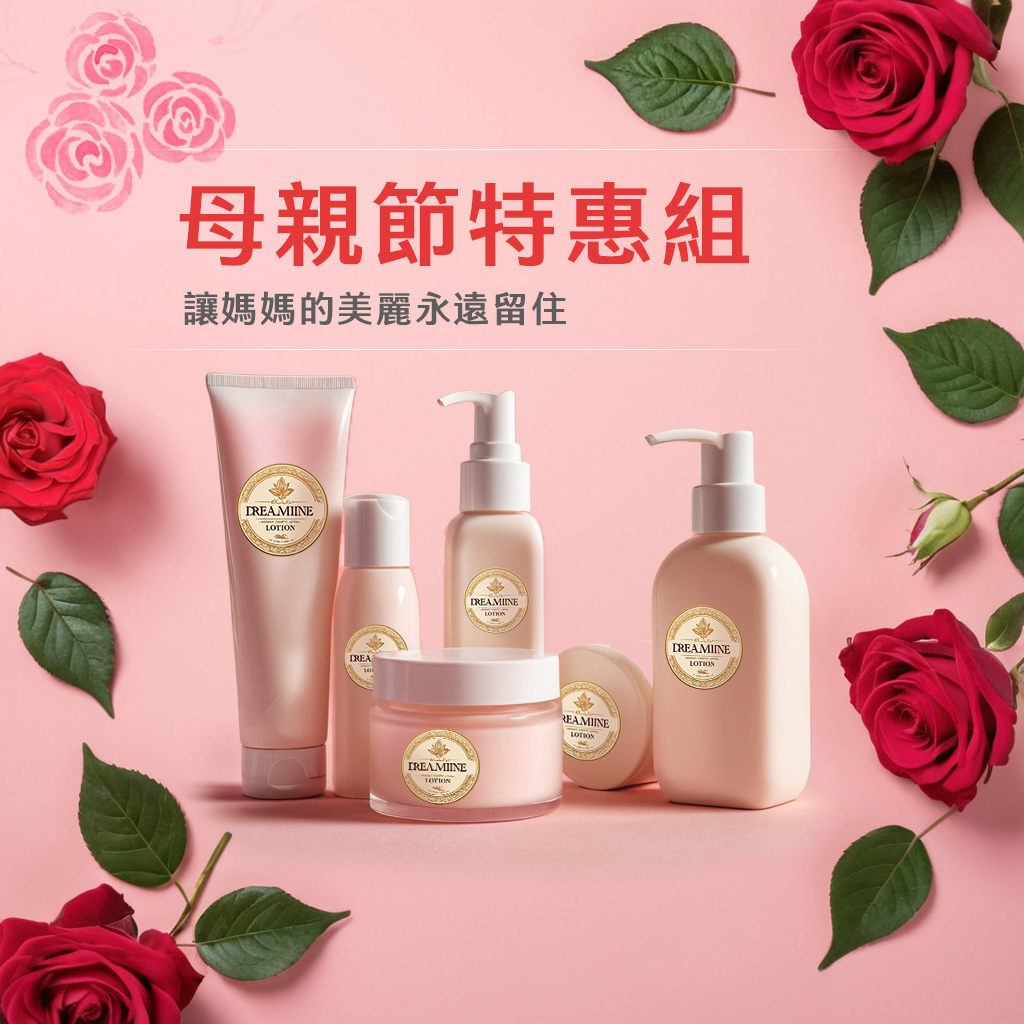
<style>
.page{position:relative;width:1024px;height:1024px}
.page>*{position:absolute;margin:0}
.t1{font:90px "ARFangXinShuH7B5Std-HV";letter-spacing:0.075em;color:#e53838}
.t2{font:36px "ARFangXinShuH7B5Std-HV";letter-spacing:0.075em;color:#5d5d5d}
</style>
<div class="page">
<p class="t1" style="left:179px;top:181px;width:570px;height:86px">母親節特惠組</p>
<p class="t2" style="left:184px;top:291px;width:382px;height:35px">讓媽媽的美麗永遠留住</p>
</div>
